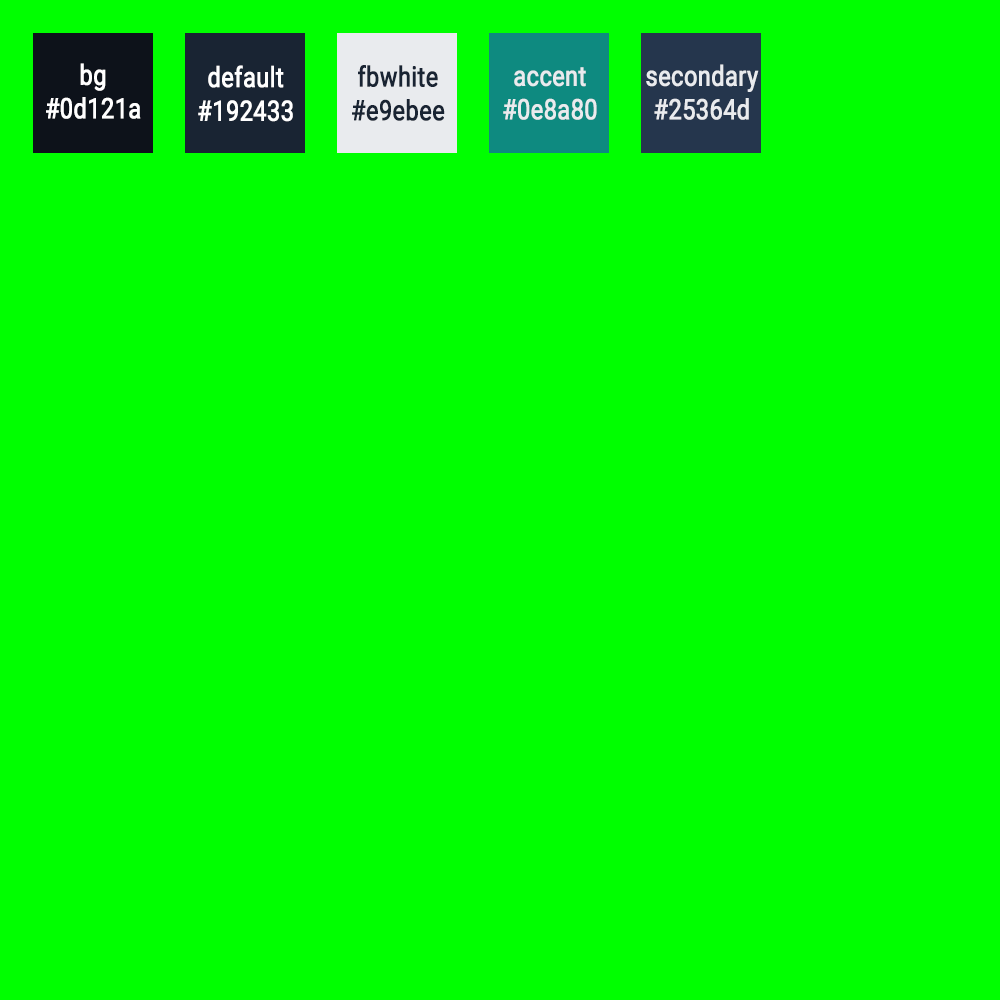
<style>
.page{position:relative;width:1000px;height:1000px;background:#00ff00}
.page>*{position:absolute;margin:0}
.t1{font:28px "Roboto-Regular";color:#ffffff;font-weight:bold;scale:0.83 1}
.t2{font:28px "Roboto-Regular";color:#192433;font-weight:bold;scale:0.83 1}
.t3{font:28px "Roboto-Regular";color:#e9ebee;font-weight:bold;scale:0.83 1}
</style>
<div class="page">
<p class="t1" style="left:46px;top:63px;width:95px;height:56px;text-align:center">bg<br>#0d121a</p>
<p class="t1" style="left:198px;top:65px;width:95px;height:57px;text-align:center">default<br>#192433</p>
<p class="t2" style="left:352px;top:65px;width:93px;height:56px;text-align:center">fbwhite<br>#e9ebee</p>
<p class="t3" style="left:646px;top:64px;width:113px;height:56px;text-align:center">secondary<br>#25364d</p>
<p class="t3" style="left:503px;top:67px;width:94px;height:53px;text-align:center">accent<br>#0e8a80</p>
</div>
